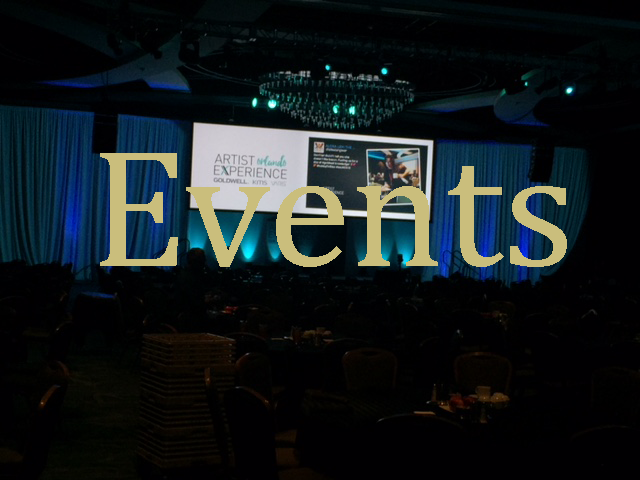
<style>
.page{position:relative;width:640px;height:480px}
.page>*{position:absolute;margin:0}
.t1{font:170px "Cambria";color:#cabe7c}
</style>
<div class="page">
<p class="t1" style="left:100px;top:153px;width:467px;height:114px">Events</p>
</div>
